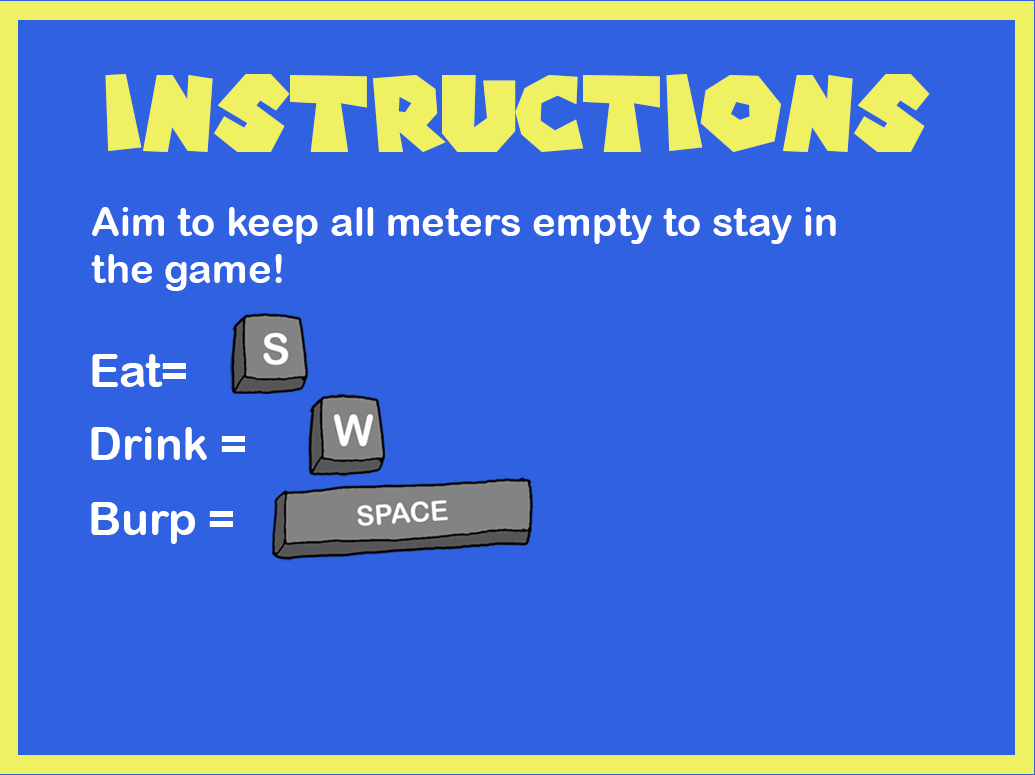
<style>
.page{position:relative;width:1035px;height:775px;background:#2f61e1}
.page>*{position:absolute;margin:0}
.t1{font:104.2px "SuperMarioGalaxy";color:#eff163}
.t2{font:40.3px/46.6px "ArialRoundedMTBold";color:#ffffff}
.t3{font:45.7px "ArialRoundedMTBold";color:#ffffff}
</style>
<div class="page">
<p class="t1" style="left:105px;top:74px;width:825px;height:78px">Instructions</p>
<p class="t2" style="left:91px;top:207px;width:745px;height:84px">Aim to keep all meters empty to stay in <br>the game!</p>
<p class="t3" style="left:92px;top:354px;width:94px;height:33px">Eat=</p>
<p class="t3" style="left:91px;top:427px;width:154px;height:33px">Drink =</p>
<p class="t3" style="left:91px;top:502px;width:142px;height:42px">Burp =</p>
</div>
